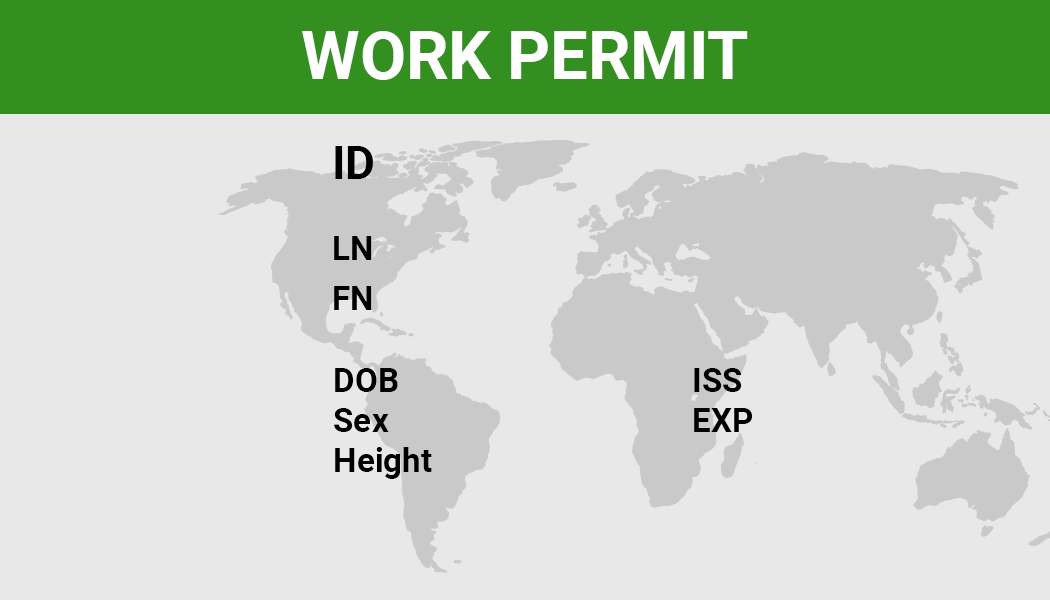
<style>
.page{position:relative;width:1050px;height:600px;background:#e8e8e8}
.page>*{position:absolute;margin:0}
.t1{font:66.7px "Roboto-Bold";color:#ffffff}
.t2{font:45.8px "Roboto-Bold";color:#000000}
.t3{font:33.3px "Roboto-Bold";color:#000000}
</style>
<div class="page">
<p class="t1" style="left:302px;top:31px;width:446px;height:49px">WORK PERMIT</p>
<p class="t2" style="left:335px;top:146px;width:38px;height:33px">ID</p>
<p class="t3" style="left:334px;top:236px;width:38px;height:24px">LN</p>
<p class="t3" style="left:334px;top:286px;width:38px;height:24px">FN</p>
<p class="t3" style="left:334px;top:368px;width:98px;height:111px">DOB<br>Sex<br>Height</p>
<p class="t3" style="left:694px;top:368px;width:59px;height:64px">ISS<br>EXP</p>
</div>
